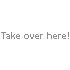
<style>
.page{position:relative;width:70px;height:70px;background:#ffffff}
.page>*{position:absolute;margin:0}
.t1{font:9px "Arial-BoldMT";color:#8c8d8b}
</style>
<div class="page">
<p class="t1" style="left:1px;top:32px;width:68px;height:7px">Take over here!</p>
</div>
